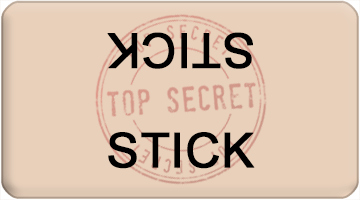
<style>
.page{position:relative;width:360px;height:200px;background:#e8d0bb}
.page>*{position:absolute;margin:0}
.t1{font:48px "ArialMT";color:#000000;font-weight:bold}
</style>
<div class="page">
<p class="t1" style="left:107px;top:32px;width:146px;height:37px;rotate:180deg">STICK</p>
<p class="t1" style="left:108px;top:132px;width:147px;height:37px">STICK</p>
</div>
